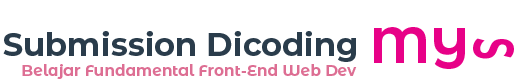
<style>
.page{position:relative;width:520px;height:79px;background:#ffffff}
.page>*{position:absolute;margin:0}
.t1{font:49.3px "MontserratAlternates-Bold";color:#e70187}
.t2{font:32px "Montserrat-Bold";color:#2a3c4b}
.t3{font:55.8px "MontserratAlternates-Bold";color:#e70187;scale:0.62 1}
.t4{font:15.3px "MontserratAlternates-Bold";color:#dd6e93}
</style>
<div class="page">
<p class="t1" style="left:374px;top:27px;width:91px;height:42px">MY</p>
<p class="t2" style="left:3px;top:31px;width:353px;height:31px">Submission Dicoding</p>
<p class="t3" style="left:473px;top:38px;width:41px;height:21px;rotate:90deg">S</p>
<p class="t4" style="left:22px;top:64px;width:335px;height:15px">Belajar Fundamental Front-End Web Dev</p>
</div>
